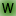
<style>
.page{position:relative;width:16px;height:16px}
.page>*{position:absolute;margin:0}
.t1{font:14px "MyriadPro-Regular";color:#000000}
</style>
<div class="page">
<p class="t1" style="left:2px;top:3px;width:12px;height:10px">W</p>
</div>
